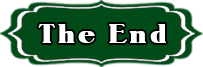
<style>
.page{position:relative;width:203px;height:67px;background:#004b18}
.page>*{position:absolute;margin:0}
.t1{font:26px "Notram";letter-spacing:0.125em;color:#ffffff}
</style>
<div class="page">
<p class="t1" style="left:38px;top:24px;width:128px;height:19px">The End</p>
</div>
